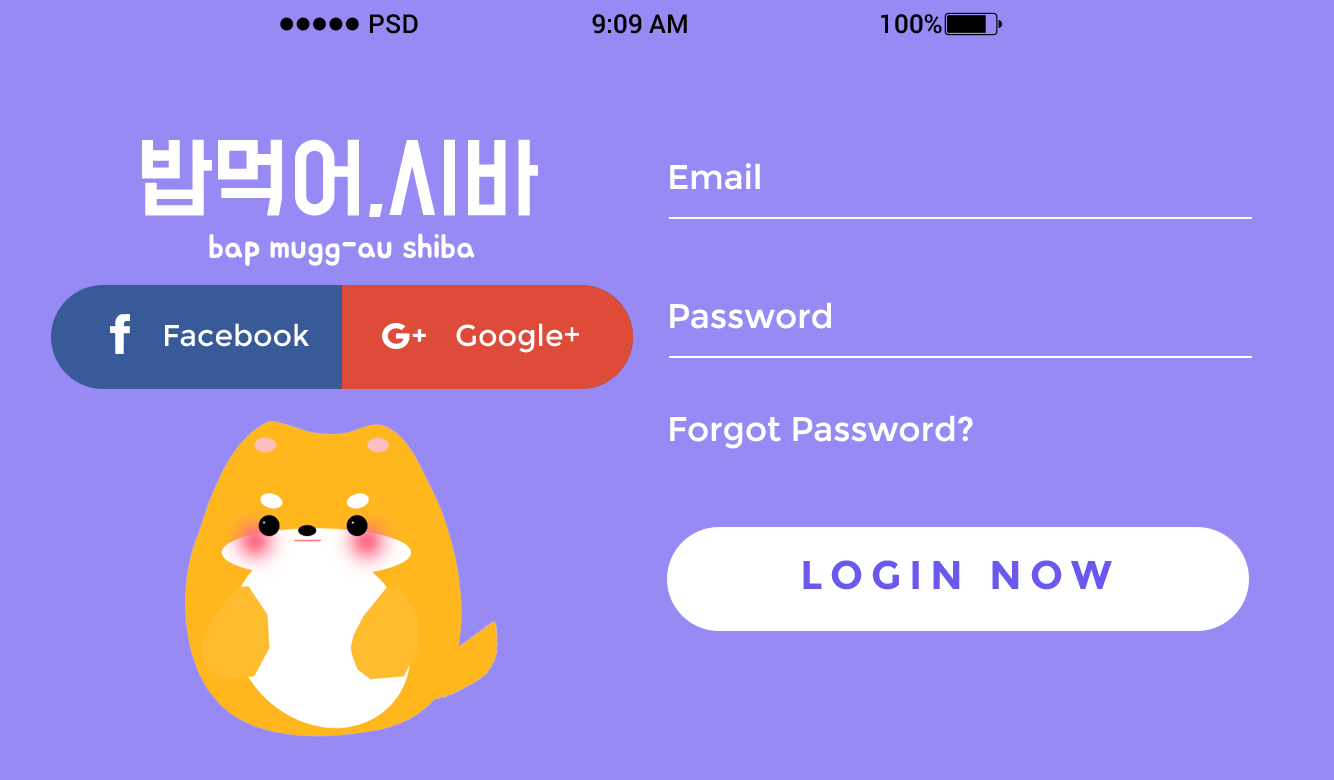
<style>
.page{position:relative;width:1334px;height:780px;background:#978af4}
.page>*{position:absolute;margin:0}
.t1{font:26px "Roboto-Medium";color:#000000}
.t2{font:80px "BMDoHyeon";color:#ffffff}
.t3{font:34px "Montserrat-Regular";color:#ffffff}
.t4{font:34px "BMJUA";color:#ffffff}
.t5{font:30px "Montserrat-Regular";color:#ffffff}
.t6{font:40px "Montserrat-Bold";letter-spacing:0.2em;color:#6b59ef;text-transform:uppercase}
</style>
<div class="page">
<p class="t1" style="left:370px;top:14px;width:48px;height:20px">PSD</p>
<p class="t1" style="left:592px;top:14px;width:95px;height:20px">9:09 AM</p>
<p class="t1" style="left:881px;top:14px;width:61px;height:20px">100%</p>
<p class="t2" style="left:142px;top:139px;width:396px;height:78px">밥먹어,시바</p>
<p class="t3" style="left:670px;top:163px;width:90px;height:27px">Email</p>
<p class="t4" style="left:209px;top:233px;width:266px;height:33px">bap mugg-au shiba</p>
<p class="t3" style="left:670px;top:302px;width:161px;height:27px">Password</p>
<p class="t5" style="left:165px;top:323px;width:144px;height:24px">Facebook</p>
<p class="t5" style="left:456px;top:323px;width:123px;height:30px">Google+</p>
<p class="t3" style="left:670px;top:415px;width:303px;height:34px">Forgot Password?</p>
<p class="t6" style="left:803px;top:560px;width:309px;height:30px">Login Now</p>
</div>
